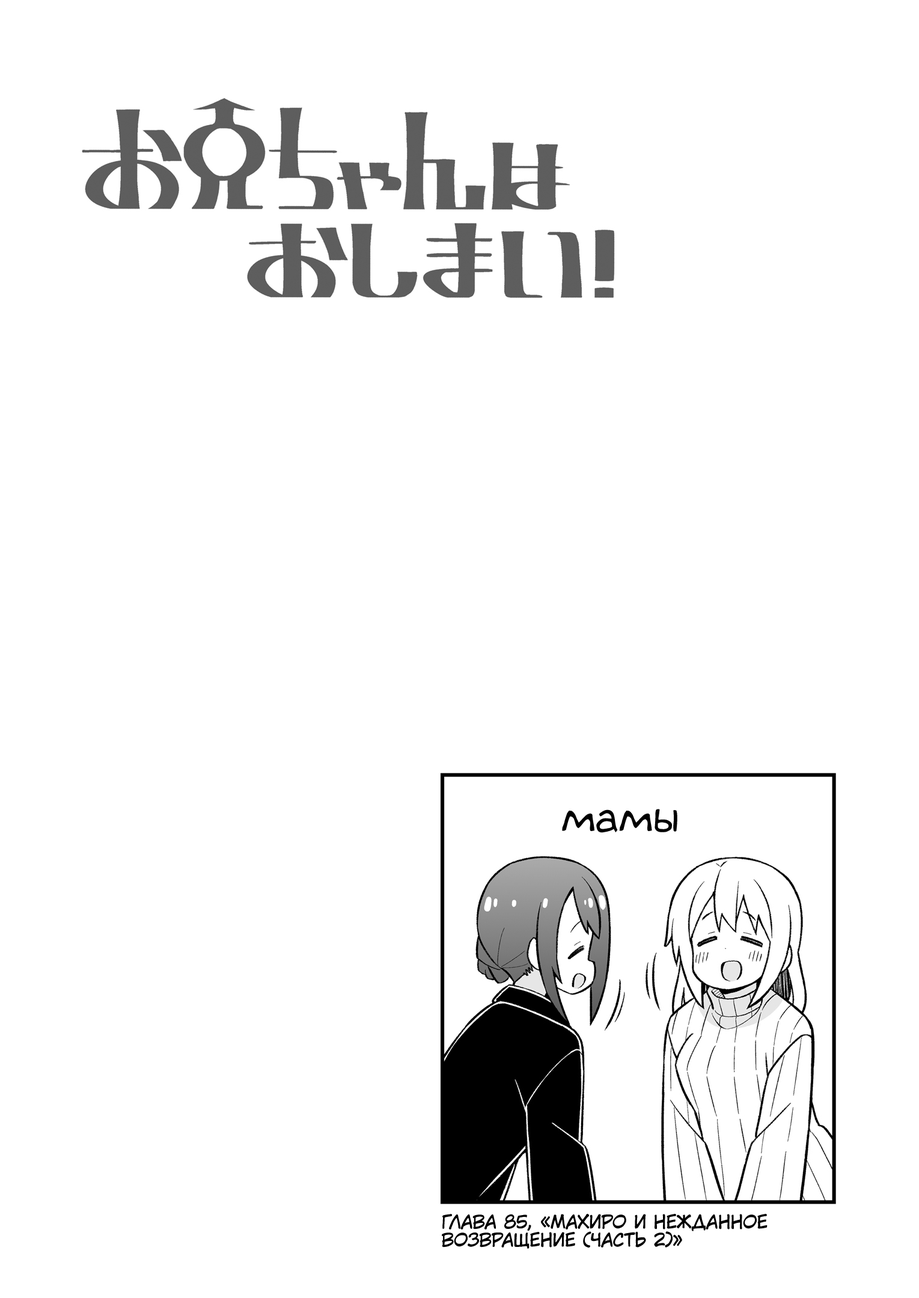
<style>
.page{position:relative;width:919px;height:1298px;background:#ffffff}
.page>*{position:absolute;margin:0}
.t1{font:43.3px "v_Augie";color:#000000}
.t2{font:18px "KuraiVoice2";color:#000000;text-transform:uppercase}
</style>
<div class="page">
<p class="t1" style="left:562px;top:809px;width:115px;height:24px">мамы</p>
<p class="t2" style="left:442px;top:1214px;width:325px;height:35px">Глава 85, «Махиро и нежданное<br>возвращение (часть 2)»</p>
</div>
